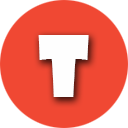
<style>
.page{position:relative;width:128px;height:128px;background:#f04833}
.page>*{position:absolute;margin:0}
.t1{font:81.6px "ShowcardGothic-Reg";color:#fefefe}
</style>
<div class="page">
<p class="t1" style="left:38px;top:35px;width:51px;height:62px">T</p>
</div>
